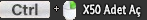
<style>
.page{position:relative;width:147px;height:20px;background:#333333}
.page>*{position:absolute;margin:0}
.t1{font:13.3px "SegoeMarker";color:#fcfcfc}
</style>
<div class="page">
<p class="t1" style="left:83px;top:4px;width:58px;height:13px">X50 Adet Aç</p>
</div>
